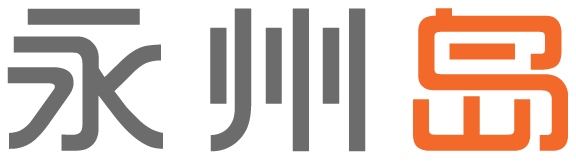
<style>
.page{position:relative;width:576px;height:162px;background:#ffffff}
.page>*{position:absolute;margin:0}
.t1{font:170.7px "TRENDS";letter-spacing:0.16em;color:#6c6c6c;font-weight:bold}
.t2{font:170.7px "TRENDS";letter-spacing:0.16em;color:#f26929;font-weight:bold}
</style>
<div class="page">
<p class="t1" style="left:7px;top:8px;width:561px;height:144px">永州<span class="t2">岛</span></p>
</div>
